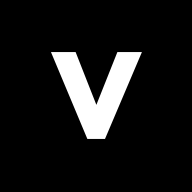
<style>
.page{position:relative;width:192px;height:192px;background:#000000}
.page>*{position:absolute;margin:0}
.t1{font:130px "Futura-Bol";color:#ffffff}
</style>
<div class="page">
<p class="t1" style="left:51px;top:52px;width:91px;height:87px">V</p>
</div>
